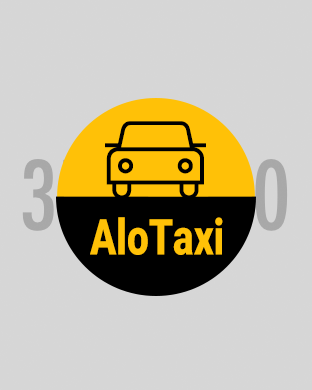
<style>
.page{position:relative;width:312px;height:390px;background:#d6d6d6}
.page>*{position:absolute;margin:0}
.t1{font:49.5px "Roboto-Black";color:#ffc107;scale:0.78 1}
</style>
<div class="page">
<p class="t1" style="left:90px;top:217px;width:133px;height:38px">AloTaxi</p>
</div>
